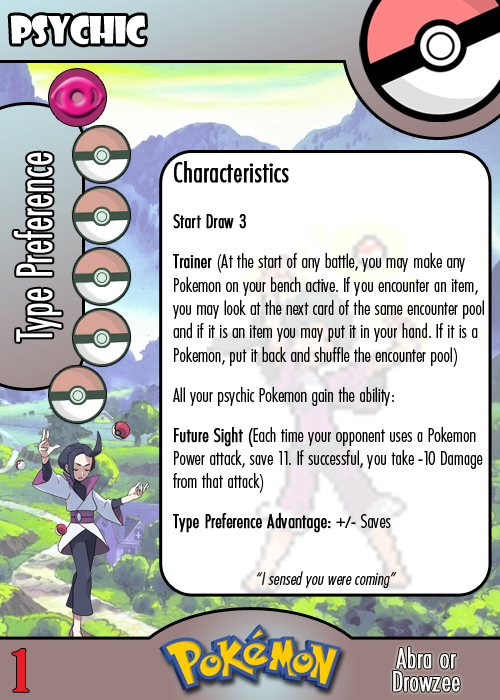
<style>
.page{position:relative;width:500px;height:700px;background:#ffffff}
.page>*{position:absolute;margin:0}
.t1{font:36.7px "ShowcardGothic-Reg";letter-spacing:-0.025em;color:#ffffff;scale:0.91 1}
.t2{font:46.7px "Futura-CondensedLight";color:#ffffff;font-weight:bold;scale:0.83 1}
.t3{font:19.4px "FuturaCondensedBQ-Light";color:#010101}
.t4{font:27.8px "FuturaCondensedBQ-Light";color:#010101;font-weight:bold}
.t5{font:19.4px "FuturaCondensedBQ-Light";color:#010101;font-weight:bold}
.t6{font:18.1px "FuturaCondensedBQ-Light";color:#010101;font-style:italic}
.t7{font:55.6px "BirchStd";color:#ed1c24;font-weight:bold;scale:1.5 1}
.t8{font:27.8px "FuturaCondensedBQ-Light";color:#f9f9f9;font-weight:bold}
</style>
<div class="page">
<p class="t1" style="left:10px;top:15px;width:135px;height:30px">psychic</p>
<p class="t2" style="left:13px;top:152px;width:49px;height:190px;rotate:-90deg">Type Preference</p>
<p class="t3" style="left:173px;top:161px;width:311px;height:372px"><span class="t4">Characteristics<br></span><span class="t5"><br>Start Draw 3<br><br>Trainer </span>(At the start of any battle, you may make any Pokemon on your bench active. If you encounter an item, you may look at the next card of the same encounter pool and if it is an item you may put it in your hand. If it is a Pokemon, put it back and shuffle the encounter pool)<br><br>All your psychic Pokemon gain the ability:<br><br><span class="t5">Future Sight (</span>Each time your opponent uses a Pokemon Power attack, save 11. If successful, you take -10 Damage from that attack)<br><br><span class="t5">Type Preference Advantage:</span> +/- Saves</p>
<p class="t6" style="left:256px;top:571px;width:141px;height:17px">“I sensed you were coming”</p>
<p class="t7" style="left:12px;top:649px;width:17px;height:43px">1</p>
<p class="t8" style="left:396px;top:646px;width:60px;height:23px">Abra or</p>
<p class="t8" style="left:393px;top:671px;width:67px;height:21px">Drowzee</p>
</div>
